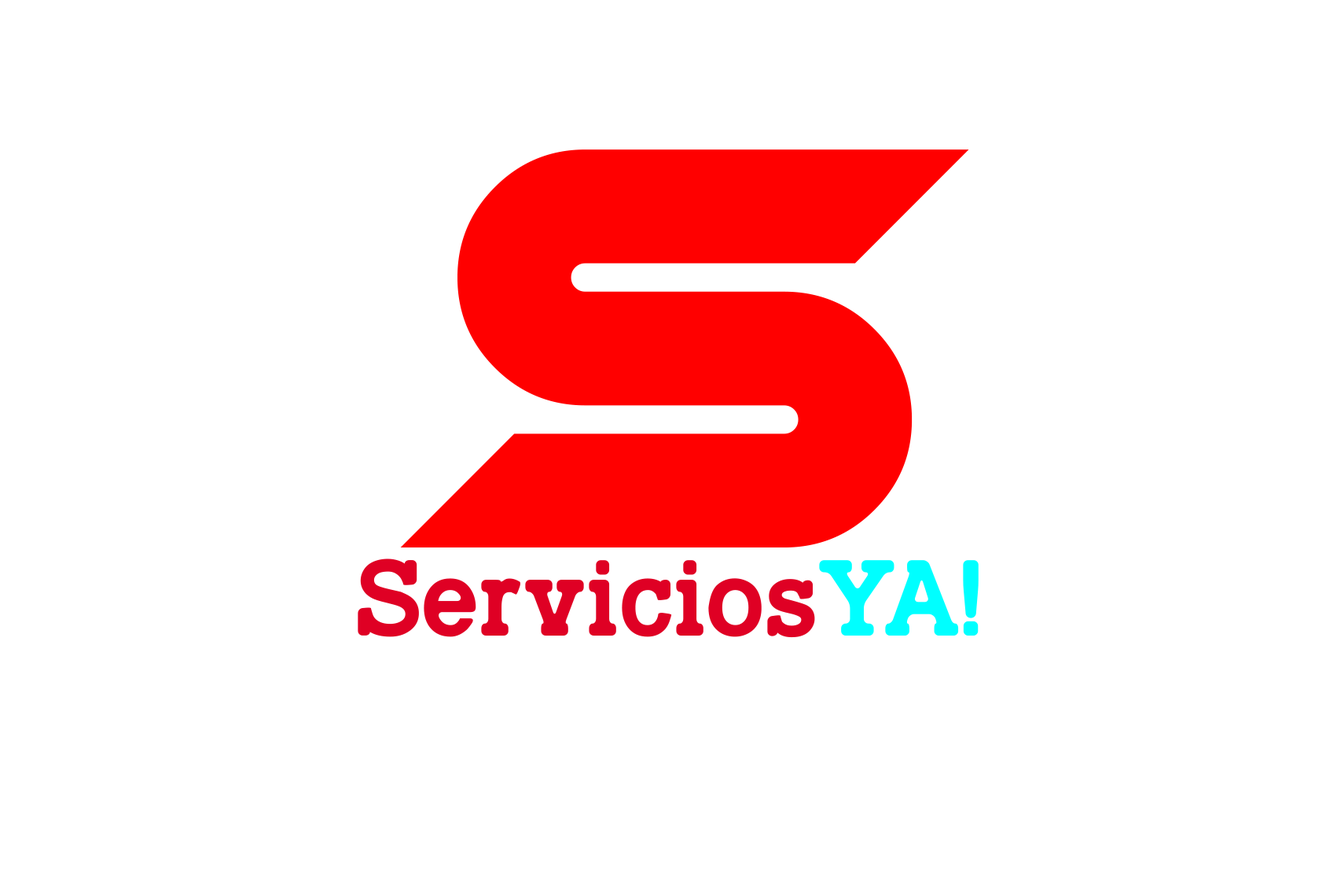
<style>
.page{position:relative;width:1337px;height:892px;background:#ffffff}
.page>*{position:absolute;margin:0}
.t1{font:581.8px "Chopsic";color:#ff0000}
.t2{font:110.1px "TypoSlabIrregularDemo";color:#df0024}
.t3{font:110.1px "TypoSlabIrregularDemo";color:#00ffff}
</style>
<div class="page">
<p class="t1" style="left:400px;top:149px;width:569px;height:398px">S</p>
<p class="t2" style="left:358px;top:558px;width:621px;height:80px">Servicios<span class="t3">YA!</span></p>
</div>
